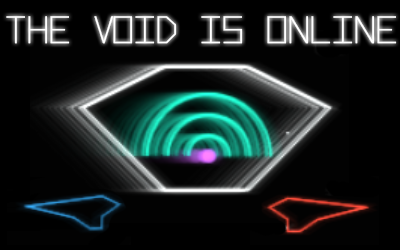
<style>
.page{position:relative;width:400px;height:250px;background:#000000}
.page>*{position:absolute;margin:0}
.t1{font:36px "Hyperspace-Bold";color:#ffffff}
</style>
<div class="page">
<p class="t1" style="left:6px;top:16px;width:391px;height:28px">THE VOID IS ONLINE</p>
</div>
